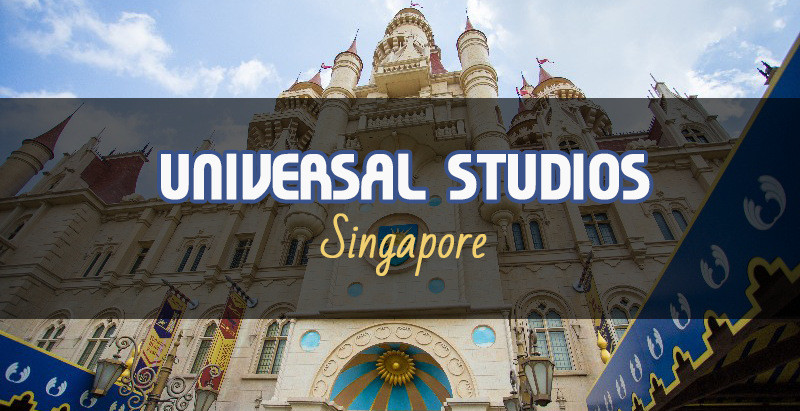
<style>
.page{position:relative;width:800px;height:411px}
.page>*{position:absolute;margin:0}
.t1{font:80px "ahn2006-B";letter-spacing:-0.035em;color:#f9f9f9;font-weight:bold}
.t2{font:45px "BadScript-Regular";letter-spacing:-0.01em;color:#f0cf71;font-weight:bold}
</style>
<div class="page">
<p class="t1" style="left:161px;top:153px;width:489px;height:47px">UNIVERSAL STUDIOS</p>
<p class="t2" style="left:320px;top:213px;width:167px;height:63px">Singapore</p>
</div>
